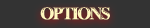
<style>
.page{position:relative;width:150px;height:28px;background:#333333}
.page>*{position:absolute;margin:0}
.t1{font:18px "TimesNewRomanPS-BoldMT";letter-spacing:-0.1em;color:#fff8bf}
</style>
<div class="page">
<p class="t1" style="left:40px;top:7px;width:70px;height:13px">OPTIONS</p>
</div>
